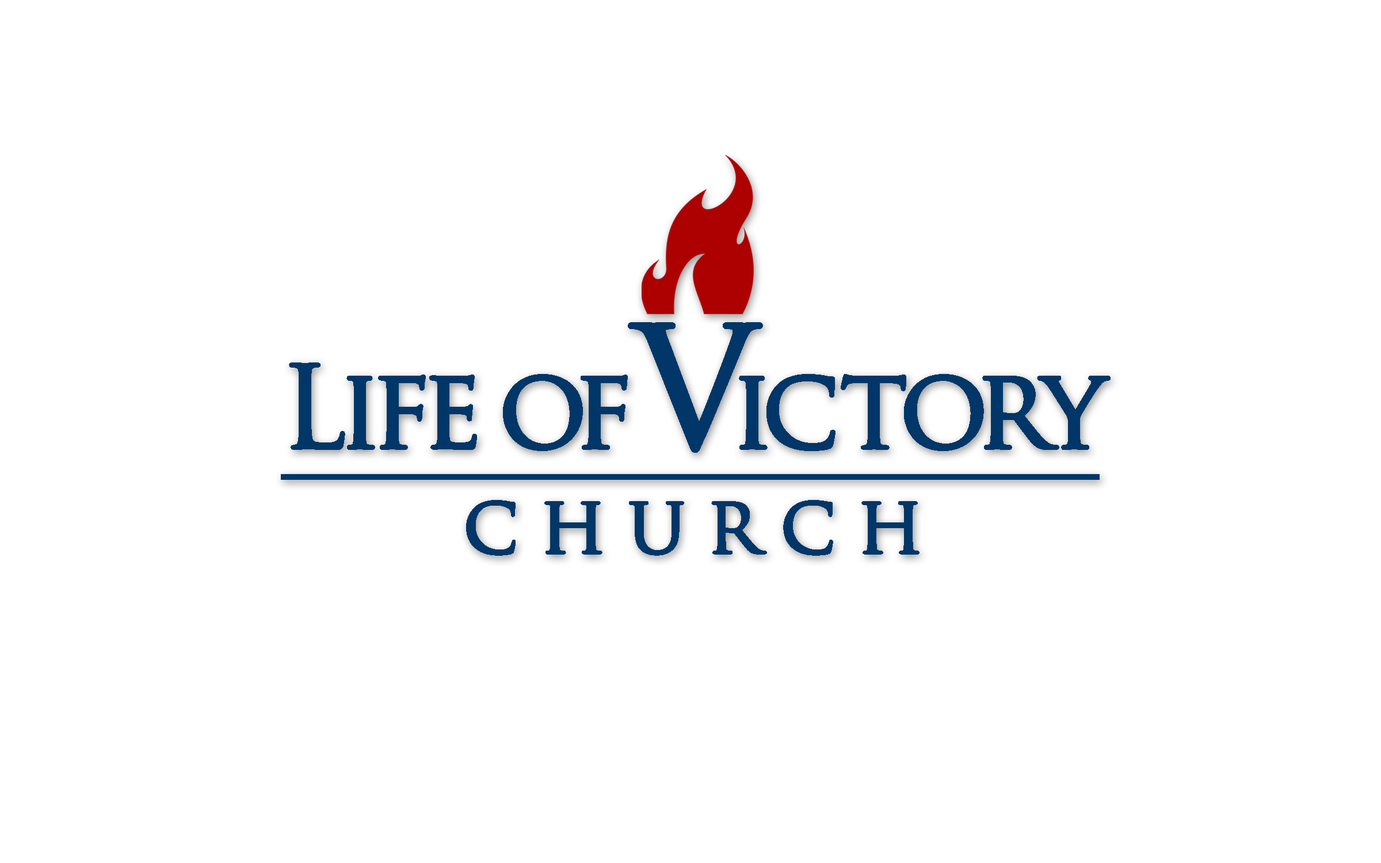
<style>
.page{position:relative;width:1381px;height:863px;background:#ffffff}
.page>*{position:absolute;margin:0}
.t1{font:79.4px/52.8px "TrajanPro-Regular";letter-spacing:-0.06em;color:#003668;font-weight:bold}
.t2{font:110.5px/52.8px "TrajanPro-Regular";letter-spacing:-0.1em;color:#003668;font-weight:bold;text-decoration:underline}
.t3{font:110.5px/52.8px "TrajanPro-Regular";letter-spacing:-0.12em;color:#003668;font-weight:bold;text-decoration:underline}
.t4{font:110.5px/52.8px "TrajanPro-Regular";letter-spacing:-0.13em;color:#003668;font-weight:bold;text-decoration:underline}
.t5{font:110.5px/52.8px "TrajanPro-Regular";letter-spacing:-0.18em;color:#003668;font-weight:bold;text-decoration:underline}
.t6{font:163.4px/52.8px "TrajanPro-Regular";letter-spacing:-0.18em;color:#003668;font-weight:bold;text-decoration:underline}
.t7{font:110.5px/52.8px "TrajanPro-Regular";letter-spacing:-0.02em;color:#003668;font-weight:bold;text-decoration:underline}
.t8{font:110.5px/52.8px "TrajanPro-Regular";letter-spacing:-0.08em;color:#003668;font-weight:bold;text-decoration:underline}
</style>
<div class="page">
<p class="t1" style="left:281px;top:322px;width:830px;height:234px;text-align:center"><span class="t2">Lif</span><span class="t3">e </span><span class="t4">o</span><span class="t5">f </span><span class="t6">V</span><span class="t3">i</span><span class="t7">c</span><span class="t8">t</span><span class="t3">o</span><span class="t8">ry<br><br></span>c h u r c h</p>
</div>
